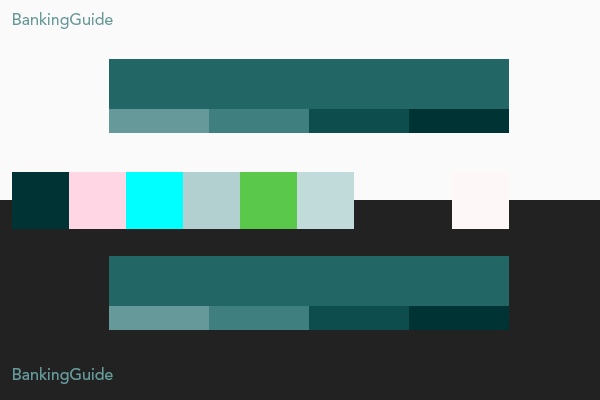
<style>
.page{position:relative;width:600px;height:400px;background:#fafafa}
.page>*{position:absolute;margin:0}
.t1{font:16px "Avenir-Roman";color:#669999}
</style>
<div class="page">
<p class="t1" style="left:13px;top:12px;width:100px;height:17px">BankingGuide</p>
<p class="t1" style="left:13px;top:367px;width:100px;height:17px">BankingGuide</p>
</div>
